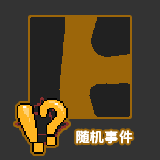
<style>
.page{position:relative;width:160px;height:160px;background:#333333}
.page>*{position:absolute;margin:0}
.t1{font:14.3px "DOUYINSANSBOLD-GB";letter-spacing:0.01em;color:#ffffff;text-transform:uppercase}
</style>
<div class="page">
<p class="t1" style="left:76px;top:130px;width:57px;height:14px">随机事件</p>
</div>
